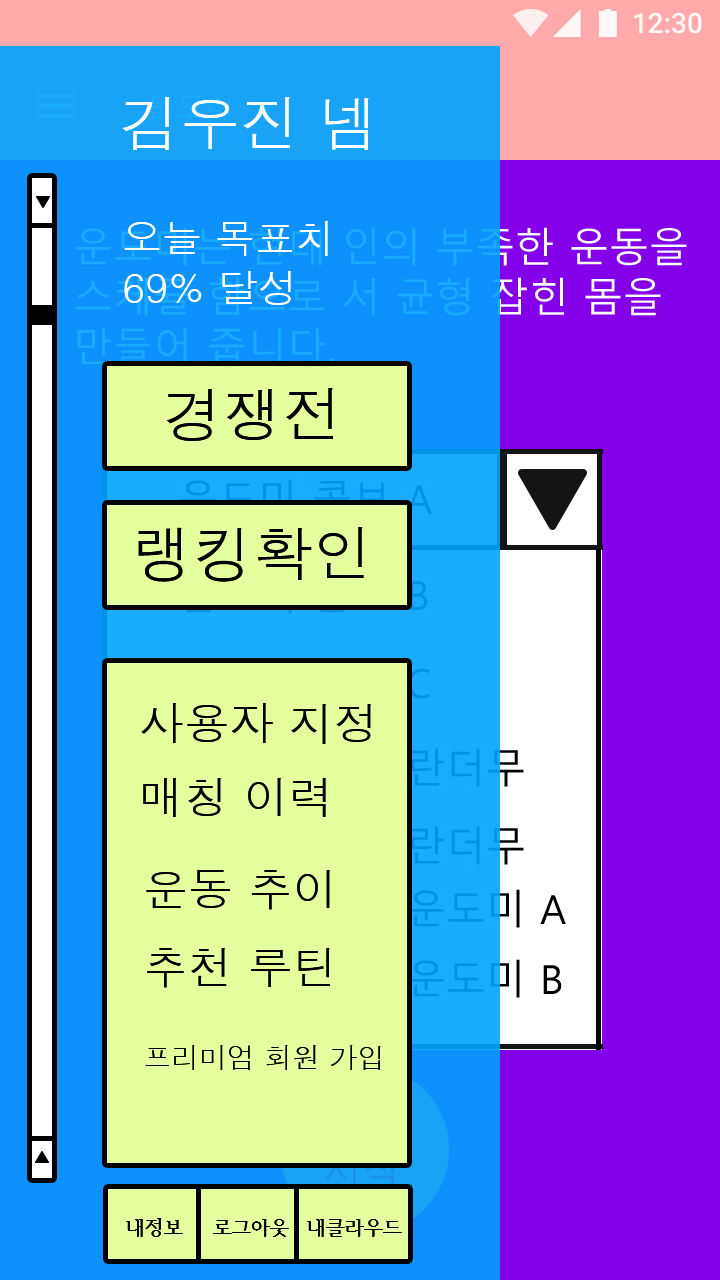
<style>
.page{position:relative;width:720px;height:1280px;background:#e5ff9f}
.page>*{position:absolute;margin:0}
.t1{font:60px "Dotum";color:#ffffff}
.t2{font:30px "Dotum";color:#19abff}
.t3{font:40px/50px "Dotum";color:#ffffff}
.t4{font:40px/50px "MalgunGothic"}
.t5{font:60px "Dotum";color:#000000}
.t6{font:45px "Dotum";color:#000000}
.t7{font:28px "Dotum";color:#000000}
.t8{font:20px "HCRBatang-Bold";color:#000000}
</style>
<div class="page">
<p class="t1" style="left:122px;top:97px;width:247px;height:53px">김우진 넴</p>
<p class="t2" style="left:148px;top:94px;width:83px;height:26px">운도미</p>
<p class="t3" style="left:124px;top:221px;width:204px;height:84px">오늘 목표치 <br>69% 달성</p>
<p class="t4" style="left:75px;top:227px;width:612px;height:139px">운도미는 현대 인의 부족한 운동을<br>스케쥴 함으로 서 균형 잡힌 몸을 <br>만들어 줍니다.</p>
<p class="t5" style="left:167px;top:388px;width:166px;height:53px">경쟁전</p>
<p class="t5" style="left:138px;top:527px;width:226px;height:55px">랭킹확인</p>
<p class="t6" style="left:141px;top:703px;width:230px;height:41px">사용자 지정</p>
<p class="t6" style="left:143px;top:778px;width:183px;height:39px">매칭 이력</p>
<p class="t6" style="left:146px;top:870px;width:184px;height:40px">운동 추이</p>
<p class="t6" style="left:147px;top:948px;width:183px;height:40px">추천 루틴</p>
<p class="t7" style="left:145px;top:1045px;width:236px;height:25px">프리미엄 회원 가입</p>
<p class="t8" style="left:126px;top:1218px;width:276px;height:19px">내정보     로그아웃   내클라우드</p>
</div>
